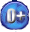
<style>
.page{position:relative;width:30px;height:32px;background:#ffffff}
.page>*{position:absolute;margin:0}
.t1{font:18px "Impact"}
</style>
<div class="page">
<p class="t1" style="left:7px;top:8px;width:19px;height:16px">0+</p>
</div>
